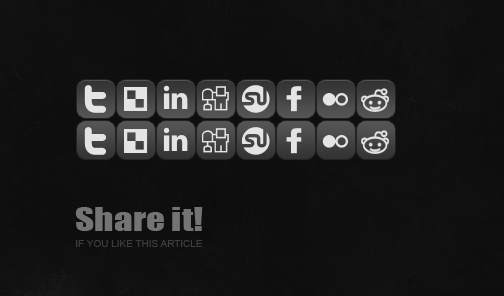
<style>
.page{position:relative;width:504px;height:296px;background:#101010}
.page>*{position:absolute;margin:0}
.t1{font:30.2px "Impact";color:#737373;scale:1.23 1}
.t2{font:10px "ArialMT";color:#3e3e3e}
</style>
<div class="page">
<p class="t1" style="left:75px;top:207px;width:128px;height:24px">Share it!</p>
<p class="t2" style="left:76px;top:240px;width:126px;height:7px">IF YOU LIKE THIS ARTICLE</p>
</div>
